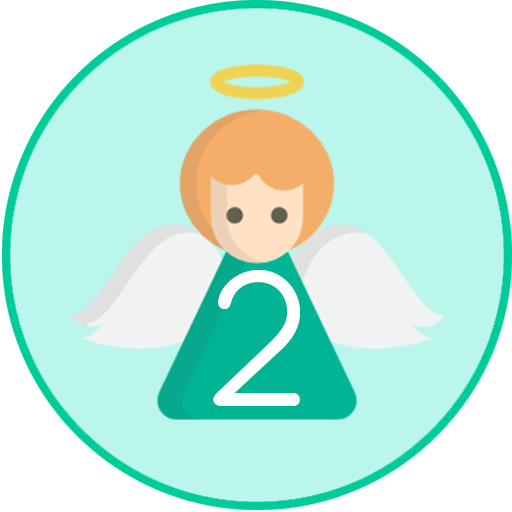
<style>
.page{position:relative;width:512px;height:512px;background:#baf6ec}
.page>*{position:absolute;margin:0}
.t1{font:213.3px "Antipasto";color:#ffffff}
</style>
<div class="page">
<p class="t1" style="left:213px;top:270px;width:87px;height:136px">2</p>
</div>
